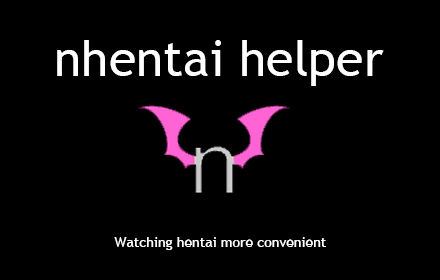
<style>
.page{position:relative;width:440px;height:280px;background:#000000}
.page>*{position:absolute;margin:0}
.t1{font:49.1px "TrebuchetMS";color:#ffffff}
.t2{font:14px "TrebuchetMS";color:#ffffff}
</style>
<div class="page">
<p class="t1" style="left:57px;top:40px;width:327px;height:46px">nhentai helper</p>
<p class="t2" style="left:114px;top:237px;width:212px;height:13px">Watching hentai more convenient</p>
</div>
